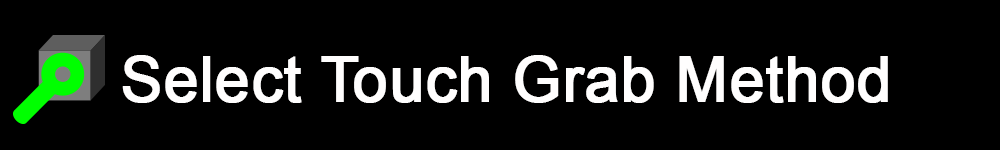
<style>
.page{position:relative;width:1000px;height:150px;background:#000000}
.page>*{position:absolute;margin:0}
.t1{font:62.5px "ArialMT";color:#fffefe;font-weight:bold}
</style>
<div class="page">
<p class="t1" style="left:122px;top:55px;width:766px;height:48px">Select Touch Grab Method</p>
</div>
